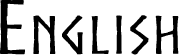
<style>
.page{position:relative;width:179px;height:55px;background:#ffffff}
.page>*{position:absolute;margin:0}
.t1{font:72px "Norse";color:#000000;font-variant:small-caps;font-weight:bold;scale:1.3 1}
</style>
<div class="page">
<p class="t1" style="left:0px;top:0px;width:179px;height:55px">English</p>
</div>
